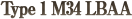
<style>
.page{position:relative;width:132px;height:19px;background:#ffffff}
.page>*{position:absolute;margin:0}
.t1{font:18px "RyuminPro-ExBold";letter-spacing:-0.08em;color:#4a3f32;font-weight:bold;scale:0.9 1}
</style>
<div class="page">
<p class="t1" style="left:0px;top:1px;width:132px;height:18px">Type 1 M34 LBAA</p>
</div>
